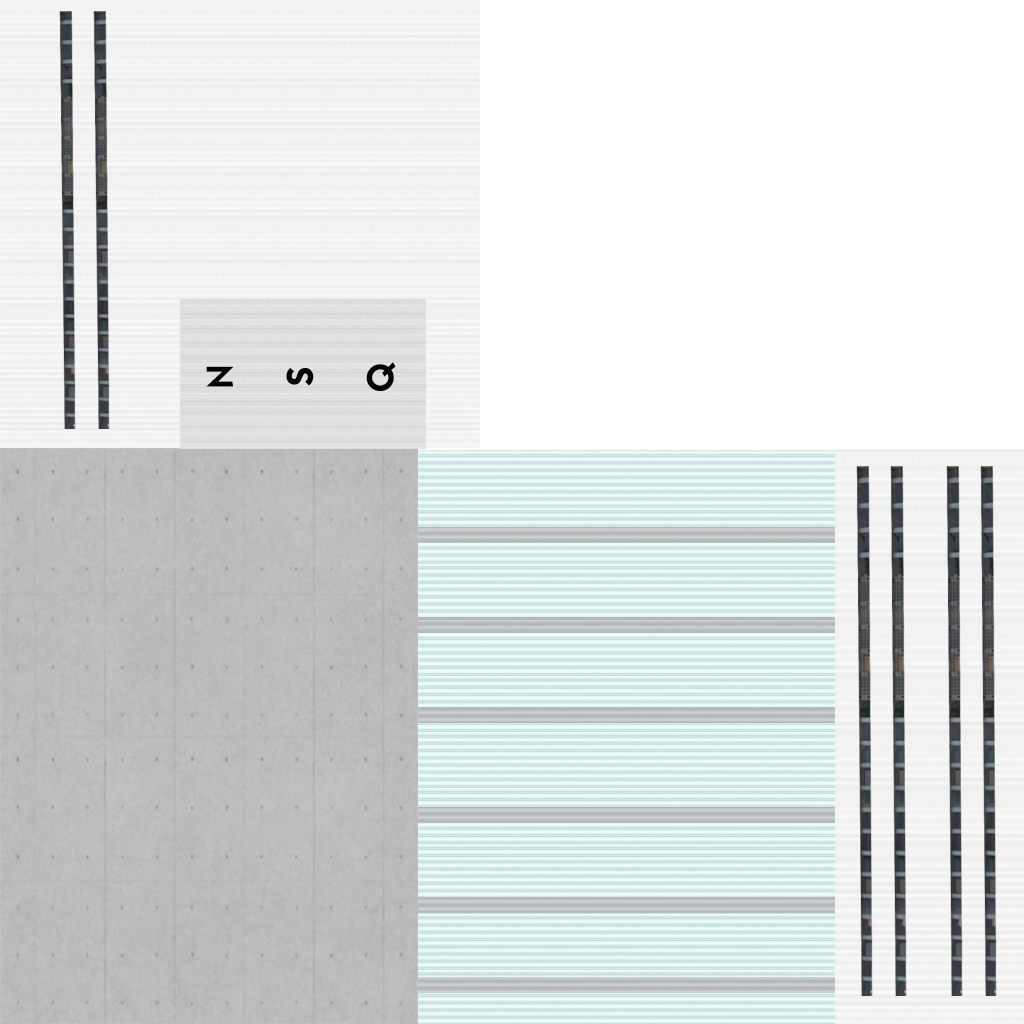
<style>
.page{position:relative;width:1024px;height:1024px;background:#ffffff}
.page>*{position:absolute;margin:0}
.t1{font:36px "ELEGANCE";color:#010101}
</style>
<div class="page">
<p class="t1" style="left:206px;top:366px;width:28px;height:21px;rotate:-90deg">N</p>
<p class="t1" style="left:366px;top:362px;width:30px;height:29px;rotate:-90deg">Q</p>
<p class="t1" style="left:286px;top:368px;width:28px;height:18px;rotate:-90deg">S</p>
</div>
